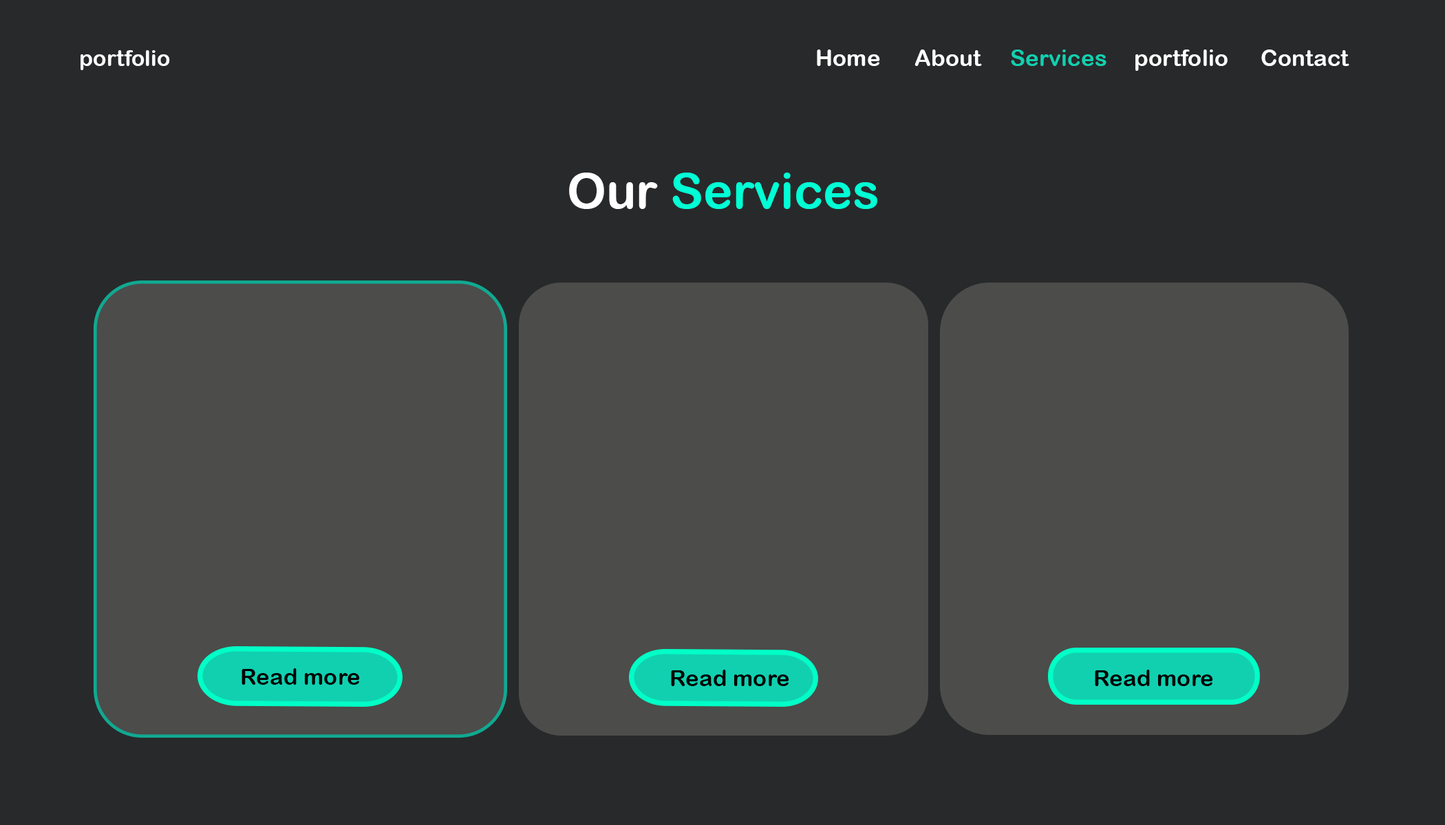
<style>
.page{position:relative;width:1445px;height:825px;background:#28292b}
.page>*{position:absolute;margin:0}
.t1{font:22.2px "ArialRoundedMTBold";color:#ffffff}
.t2{font:22.9px "ArialRoundedMTBold";color:#ffffff}
.t3{font:22.9px "ArialRoundedMTBold";color:#11d0b0}
.t4{font:49.4px "ArialRoundedMTBold";color:#00ffd5}
.t5{font:49.4px "ArialRoundedMTBold";color:#ffffff}
.t6{font:22.9px "ArialRoundedMTBold";color:#000000}
</style>
<div class="page">
<p class="t1" style="left:80px;top:50px;width:90px;height:20px">portfolio</p>
<p class="t2" style="left:817px;top:50px;width:63px;height:16px">Home</p>
<p class="t2" style="left:914px;top:50px;width:68px;height:16px">About</p>
<p class="t3" style="left:1011px;top:50px;width:95px;height:16px">Services</p>
<p class="t2" style="left:1135px;top:50px;width:92px;height:21px">portfolio</p>
<p class="t2" style="left:1261px;top:50px;width:88px;height:16px">Contact</p>
<p class="t4" style="left:569px;top:173px;width:308px;height:36px"><span class="t5">Our </span>Services</p>
<p class="t6" style="left:241px;top:669px;width:119px;height:16px">Read more</p>
<p class="t6" style="left:671px;top:670px;width:118px;height:17px">Read more</p>
<p class="t6" style="left:1094px;top:670px;width:119px;height:17px">Read more</p>
</div>
